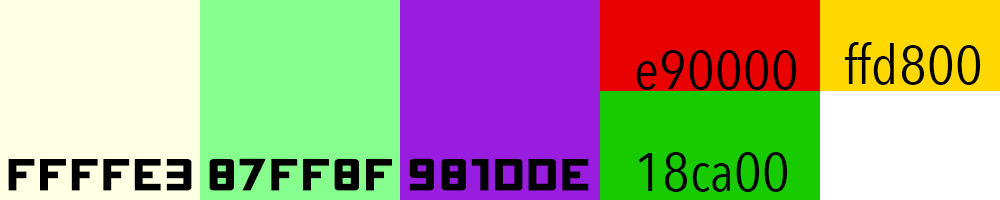
<style>
.page{position:relative;width:1000px;height:200px}
.page>*{position:absolute;margin:0}
.t1{font:54.1px "AvenirNextCondensed-Regular";color:#000000;scale:1.1 1}
.t2{font:72px "ONRAMP";color:#000000;scale:1.1 1}
</style>
<div class="page">
<p class="t1" style="left:636px;top:50px;width:161px;height:40px">e90000</p>
<p class="t1" style="left:844px;top:42px;width:137px;height:43px">ffd800</p>
<p class="t2" style="left:8px;top:159px;width:184px;height:32px">ffffe3</p>
<p class="t2" style="left:209px;top:158px;width:183px;height:33px">87ff8f</p>
<p class="t2" style="left:409px;top:158px;width:180px;height:33px">981dde</p>
<p class="t1" style="left:638px;top:152px;width:150px;height:40px">18ca00</p>
</div>
